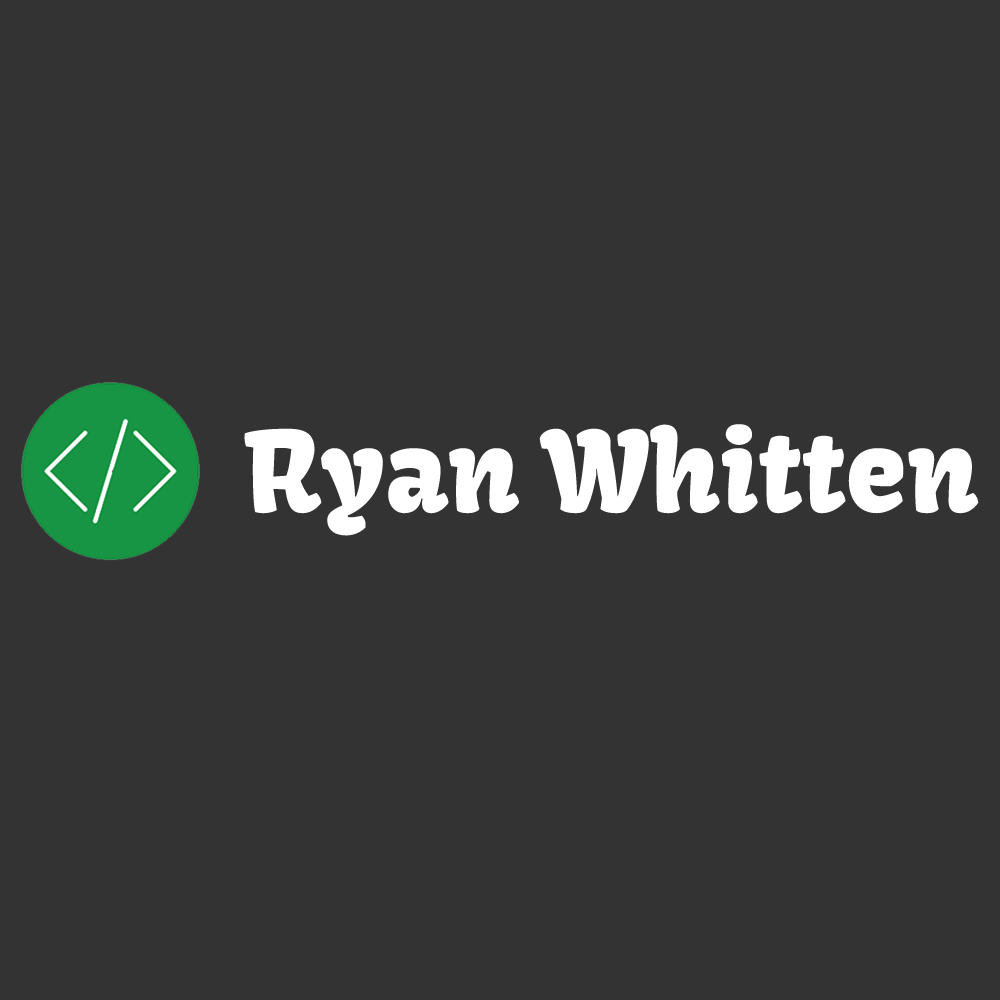
<style>
.page{position:relative;width:1000px;height:1000px;background:#333333}
.page>*{position:absolute;margin:0}
.t1{font:110.2px "Kavoon-Regular";color:#ffffff}
</style>
<div class="page">
<p class="t1" style="left:244px;top:424px;width:735px;height:112px">Ryan Whitten</p>
</div>
